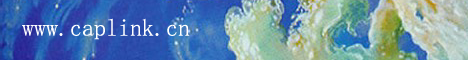
<style>
.page{position:relative;width:468px;height:60px}
.page>*{position:absolute;margin:0}
.t1{font:24px "YouYuan";color:#ffffff}
</style>
<div class="page">
<p class="t1" style="left:22px;top:18px;width:168px;height:22px">www.caplink.cn</p>
</div>
